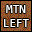
<style>
.page{position:relative;width:32px;height:32px;background:#996633}
.page>*{position:absolute;margin:0}
.t1{font:12px "Consolas";color:#ffffff}
</style>
<div class="page">
<p class="t1" style="left:4px;top:5px;width:25px;height:22px;text-align:center">MTN<br>LEFT</p>
</div>
